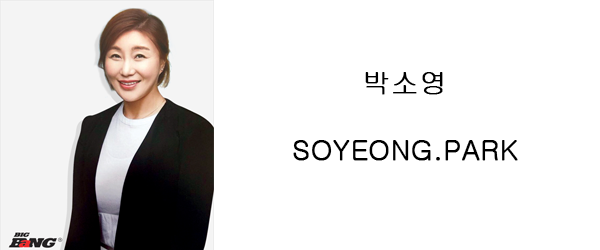
<style>
.page{position:relative;width:600px;height:250px;background:#ffffff}
.page>*{position:absolute;margin:0}
.t1{font:27.8px "Gulim";color:#000000;font-weight:bold}
</style>
<div class="page">
<p class="t1" style="left:293px;top:72px;width:225px;height:89px;text-align:center">박소영<br><br>SOYEONG.PARK</p>
</div>
